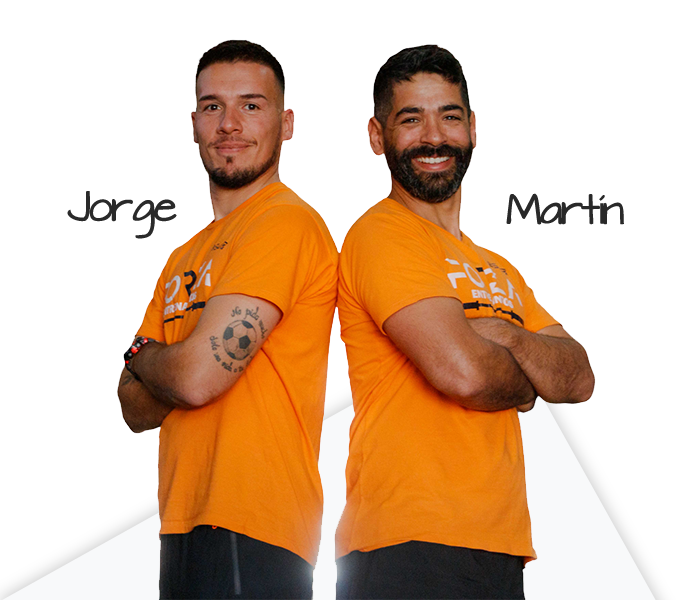
<style>
.page{position:relative;width:680px;height:600px;background:#ffffff}
.page>*{position:absolute;margin:0}
.t1{font:36px "ArchitectsDaughter";letter-spacing:-0.05em;color:#2a2a2a}
.t2{font:36px "ArchitectsDaughter";letter-spacing:-0.05em;color:#292929}
</style>
<div class="page">
<p class="t1" style="left:67px;top:191px;width:110px;height:48px">Jorge</p>
<p class="t2" style="left:506px;top:193px;width:118px;height:32px">Martín</p>
</div>
